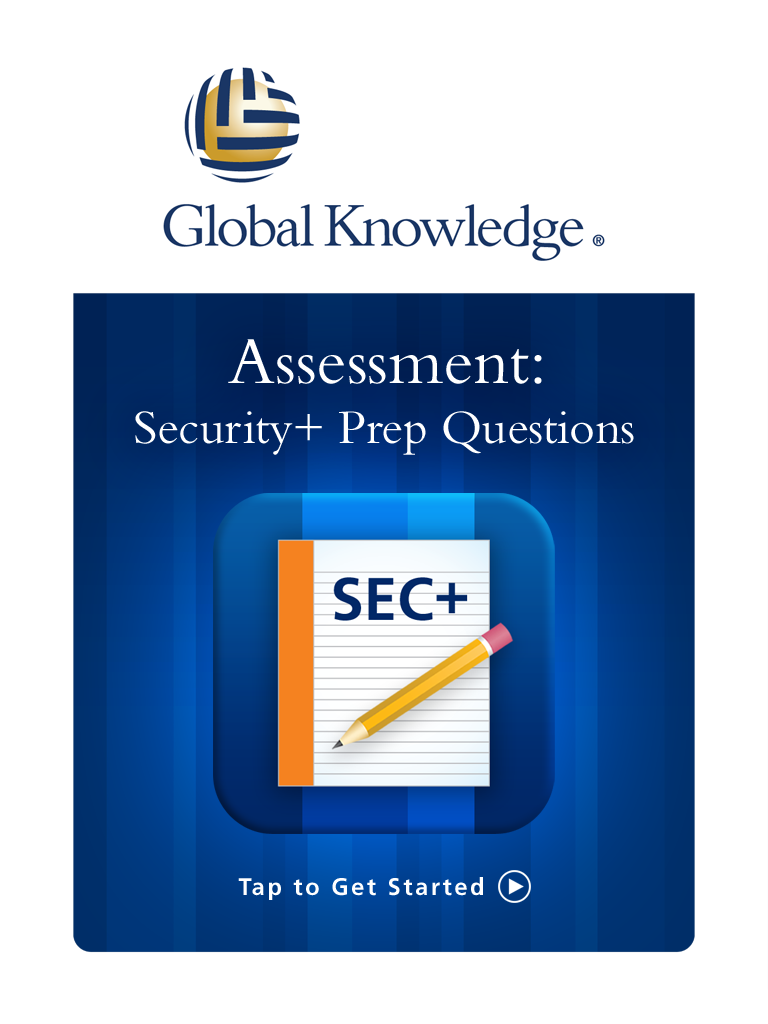
<style>
.page{position:relative;width:768px;height:1024px;background:#ffffff}
.page>*{position:absolute;margin:0}
.t1{font:50px "Bembo";letter-spacing:-0.01em;color:#ffffff}
.t2{font:68.8px "Bembo";color:#ffffff}
.t3{font:24px "Frutiger-Bold";letter-spacing:0.1em;color:#ffffff}
</style>
<div class="page">
<p class="t1" style="left:135px;top:339px;width:499px;height:116px;text-align:center"><span class="t2">Assessment:<br></span>Security+ Prep Questions</p>
<p class="t3" style="left:238px;top:877px;width:245px;height:23px">Tap to Get Started</p>
</div>
